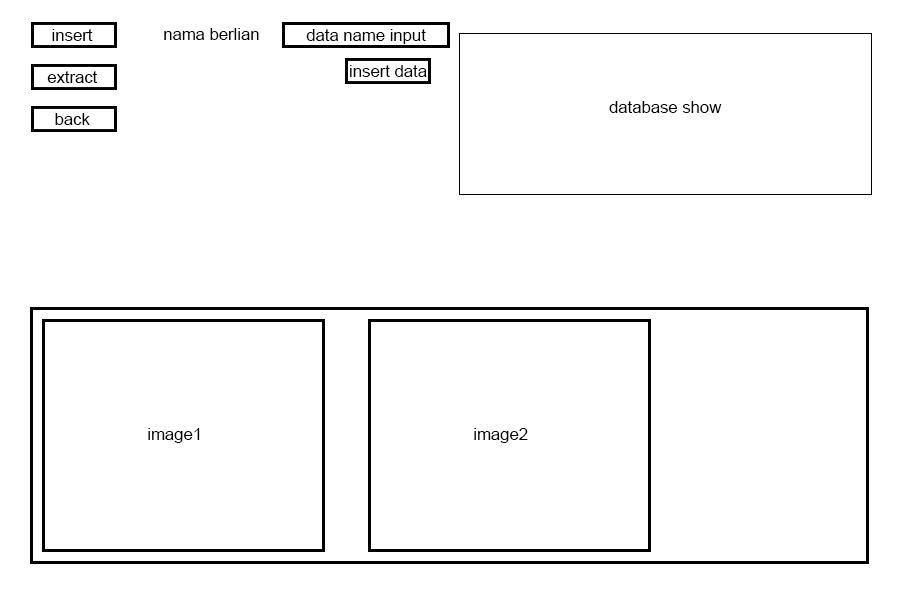
<style>
.page{position:relative;width:900px;height:600px;background:#ffffff}
.page>*{position:absolute;margin:0}
.t1{font:16.7px "ArialMT";color:#000000}
</style>
<div class="page">
<p class="t1" style="left:52px;top:29px;width:41px;height:12px">insert</p>
<p class="t1" style="left:164px;top:28px;width:95px;height:12px">nama berlian</p>
<p class="t1" style="left:306px;top:29px;width:120px;height:15px">data name input</p>
<p class="t1" style="left:350px;top:65px;width:77px;height:12px">insert data</p>
<p class="t1" style="left:47px;top:71px;width:51px;height:12px">extract</p>
<p class="t1" style="left:609px;top:101px;width:113px;height:12px">database show</p>
<p class="t1" style="left:55px;top:113px;width:35px;height:12px">back</p>
<p class="t1" style="left:148px;top:428px;width:52px;height:15px">image1</p>
<p class="t1" style="left:474px;top:428px;width:54px;height:15px">image2</p>
</div>
